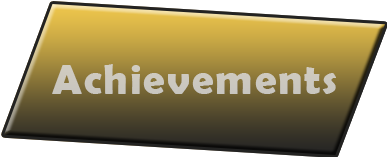
<style>
.page{position:relative;width:387px;height:157px;background:#ffffff}
.page>*{position:absolute;margin:0}
.t1{font:41.8px "BerlinSansFBDemi-Bold";letter-spacing:0.04em;color:#cbc8bf;scale:1.03 1}
</style>
<div class="page">
<p class="t1" style="left:52px;top:64px;width:284px;height:30px">Achievements</p>
</div>
